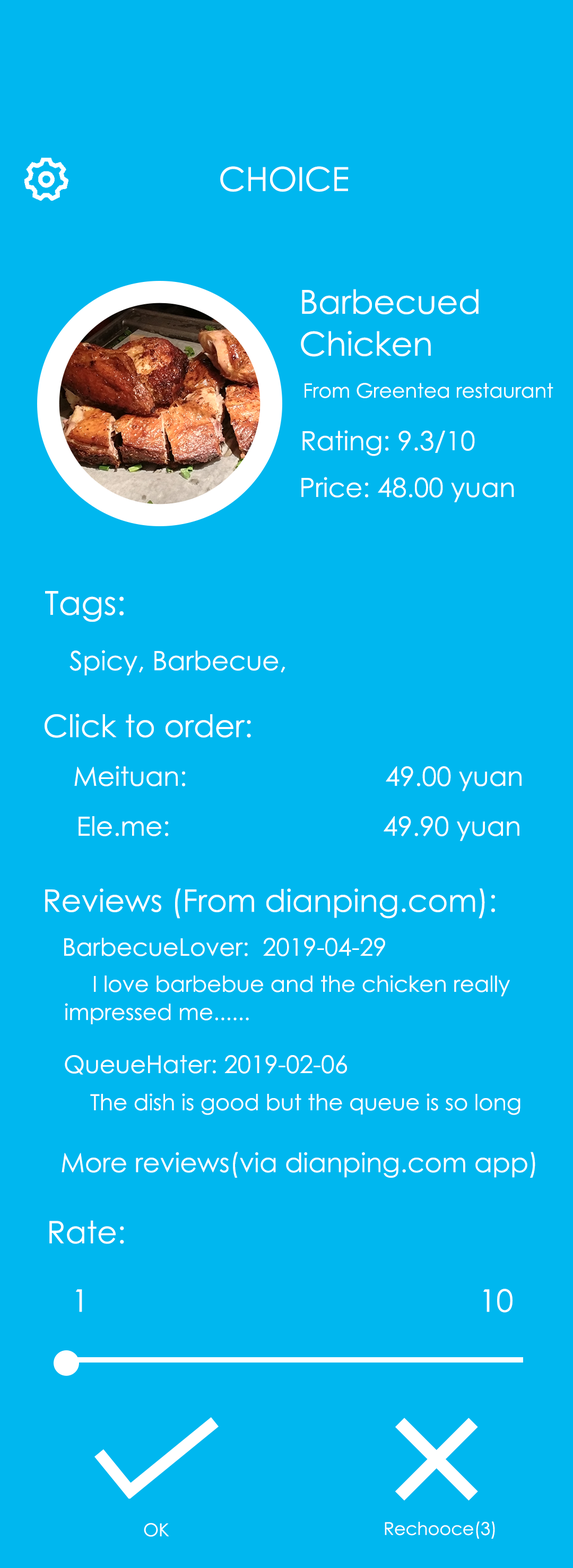
<style>
.page{position:relative;width:573px;height:1568px;background:#00b7ef}
.page>*{position:absolute;margin:0}
.t1{font:33.2px "CenturyGothic";color:#ffffff}
.t2{font:19.9px "CenturyGothic";color:#ffffff}
.t3{font:26.5px "CenturyGothic";color:#ffffff}
.t4{font:6.4px "CenturyGothic";color:#ffffff}
.t5{font:31px "CenturyGothic";color:#ffffff}
.t6{font:24.3px "CenturyGothic";color:#ffffff}
.t7{font:22.1px "CenturyGothic";color:#ffffff}
.t8{font:199.1px "CenturyGothic";color:#ffffff}
.t9{font:17.7px "CenturyGothic";color:#ffffff}
</style>
<div class="page">
<p class="t1" style="left:220px;top:166px;width:129px;height:26px">CHOICE</p>
<p class="t1" style="left:302px;top:289px;width:177px;height:25px">Barbecued</p>
<p class="t1" style="left:301px;top:331px;width:130px;height:26px">Chicken</p>
<p class="t2" style="left:305px;top:383px;width:249px;height:15px">From Greentea restaurant</p>
<p class="t3" style="left:303px;top:430px;width:172px;height:26px">Rating: 9.3/10</p>
<p class="t4" style="left:302px;top:477px;width:213px;height:25px">Price: 48.00 yuan</p>
<p class="t1" style="left:45px;top:591px;width:79px;height:31px">Tags:</p>
<p class="t4" style="left:70px;top:650px;width:216px;height:25px">Spicy, Barbecue,</p>
<p class="t5" style="left:45px;top:714px;width:206px;height:24px">Click to order:</p>
<p class="t3" style="left:74px;top:766px;width:448px;height:25px">Meituan:                           49.00 yuan</p>
<p class="t4" style="left:79px;top:816px;width:441px;height:25px">Ele.me:                             49.90 yuan</p>
<p class="t5" style="left:45px;top:888px;width:450px;height:31px">Reviews (From dianping.com):</p>
<p class="t6" style="left:64px;top:938px;width:321px;height:18px">BarbecueLover:  2019-04-29</p>
<p class="t7" style="left:94px;top:975px;width:416px;height:22px">I love barbebue and the chicken really</p>
<p class="t7" style="left:65px;top:1003px;width:184px;height:21px">impressed me......</p>
<p class="t6" style="left:65px;top:1055px;width:282px;height:20px">QueueHater: 2019-02-06</p>
<p class="t7" style="left:90px;top:1093px;width:431px;height:22px">The dish is good but the queue is so long</p>
<p class="t3" style="left:62px;top:1152px;width:474px;height:26px">More reviews(via dianping.com app)</p>
<p class="t5" style="left:49px;top:1220px;width:75px;height:24px">Rate:</p>
<p class="t5" style="left:76px;top:1289px;width:6px;height:23px">1</p>
<p class="t5" style="left:484px;top:1289px;width:29px;height:24px">10</p>
<p class="t8" style="left:396px;top:1418px;width:82px;height:83px">×</p>
<p class="t9" style="left:144px;top:1523px;width:25px;height:14px">OK</p>
<p class="t9" style="left:385px;top:1521px;width:110px;height:18px">Rechooce(3)</p>
</div>
